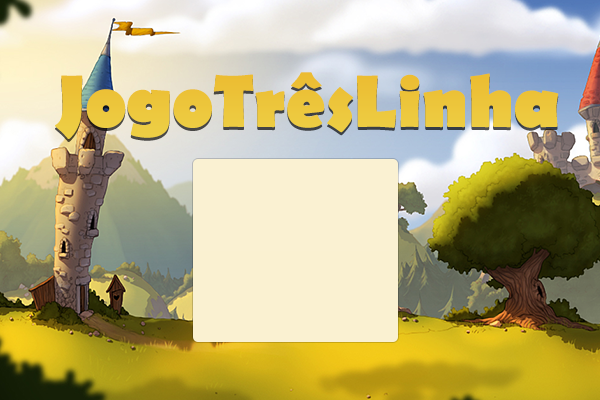
<style>
.page{position:relative;width:600px;height:400px}
.page>*{position:absolute;margin:0}
.t1{font:75px "BerlinSansFB-Bold";color:#edc63b}
</style>
<div class="page">
<p class="t1" style="left:55px;top:72px;width:504px;height:67px">JogoTrêsLinha</p>
</div>
